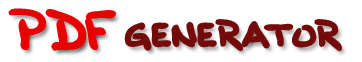
<style>
.page{position:relative;width:362px;height:62px;background:#ffffff}
.page>*{position:absolute;margin:0}
.t1{font:48px "BobbiesHand";color:#e80000}
.t2{font:30px "BobbiesHand";color:#740b0b}
</style>
<div class="page">
<p class="t1" style="left:10px;top:10px;width:105px;height:39px">PDF</p>
<p class="t2" style="left:126px;top:21px;width:214px;height:29px">GENERATOR</p>
</div>
